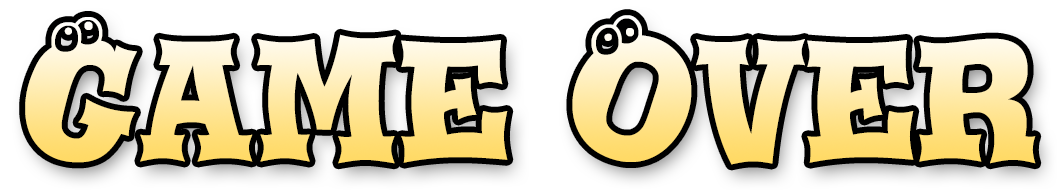
<style>
.page{position:relative;width:1060px;height:190px;background:#ffffff}
.page>*{position:absolute;margin:0}
.t1{font:170px "EyeballsBT-Regular";letter-spacing:0.01em}
</style>
<div class="page">
<p class="t1" style="left:25px;top:15px;width:1011px;height:150px">Game Over</p>
</div>
